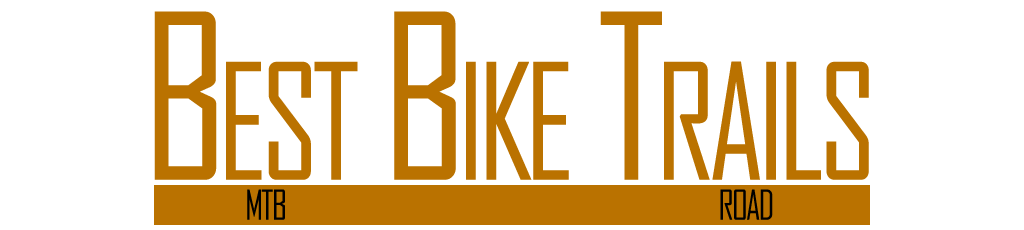
<style>
.page{position:relative;width:1024px;height:230px;background:#ffffff}
.page>*{position:absolute;margin:0}
.t1{font:220px "AgencyFB-Reg";letter-spacing:-0.05em;color:#ba7200;font-variant:small-caps;scale:0.91 1}
.t2{font:39.6px "AgencyFB-Reg";letter-spacing:-0.05em;color:#000000;font-variant:small-caps;scale:0.91 1}
</style>
<div class="page">
<p class="t1" style="left:154px;top:11px;width:715px;height:169px">Best Bike Trails</p>
<p class="t2" style="left:247px;top:189px;width:526px;height:31px">MTB             ROAD</p>
</div>
